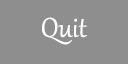
<style>
.page{position:relative;width:128px;height:64px;background:#8e8e8e}
.page>*{position:absolute;margin:0}
.t1{font:33px "Gabriola";color:#ffffff}
</style>
<div class="page">
<p class="t1" style="left:42px;top:17px;width:45px;height:28px">Quit</p>
</div>
